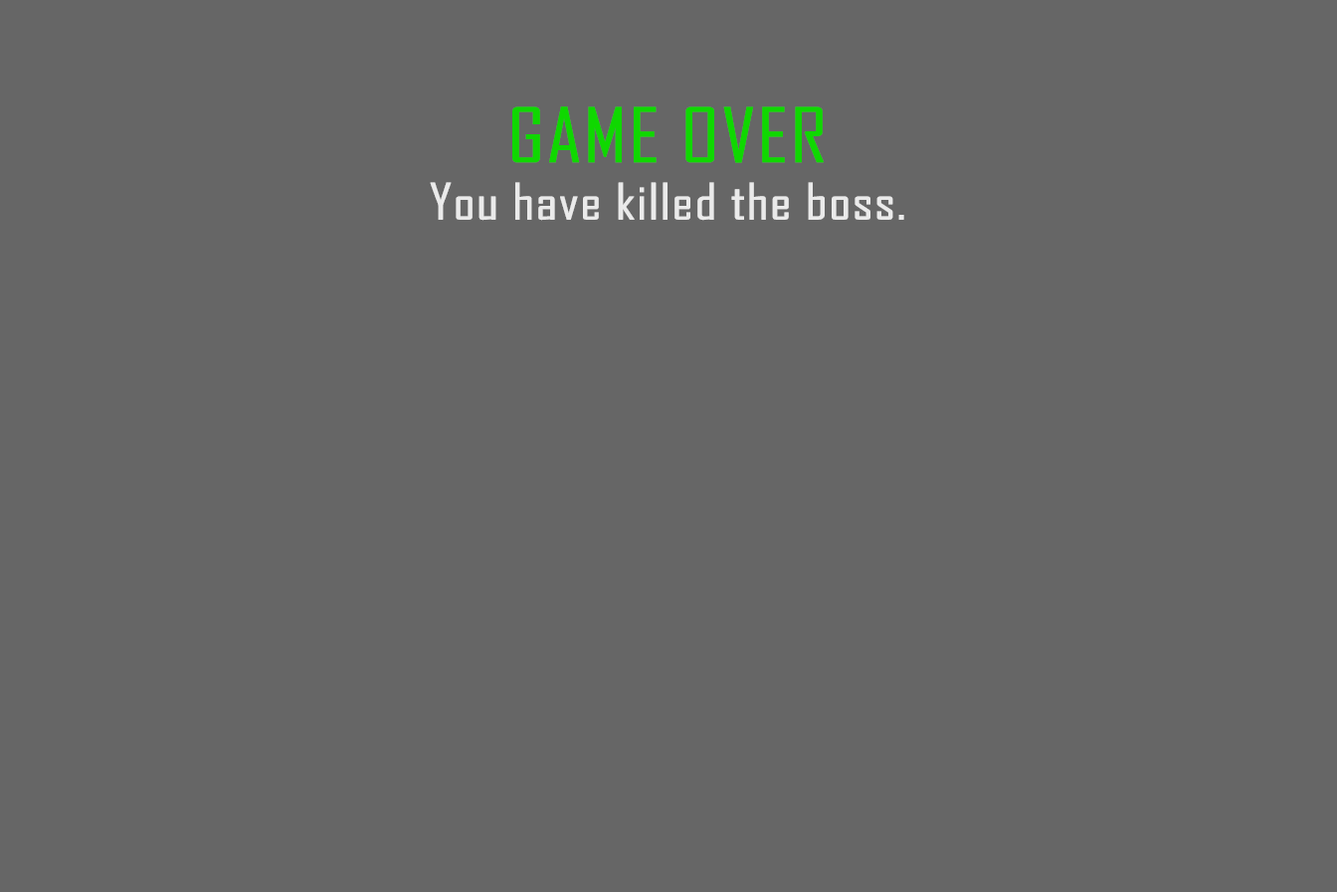
<style>
.page{position:relative;width:1337px;height:892px;background:#666666}
.page>*{position:absolute;margin:0}
.t1{font:47.7px "AgencyFB-Reg";color:#eaeaea;font-weight:bold;scale:1.2 1}
.t2{font:71.6px "AgencyFB-Reg";color:#0fd800;font-weight:bold;scale:1.2 1}
</style>
<div class="page">
<p class="t1" style="left:430px;top:106px;width:474px;height:115px;text-align:center"><span class="t2">GAME OVER<br></span>You have killed the boss.</p>
</div>
